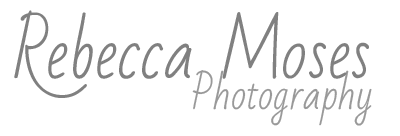
<style>
.page{position:relative;width:400px;height:136px;background:#ffffff}
.page>*{position:absolute;margin:0}
.t1{font:68.2px "BadScript-Regular";color:#808080}
.t2{font:39.8px "BadScript-Regular";color:#999999}
</style>
<div class="page">
<p class="t1" style="left:14px;top:10px;width:355px;height:88px">Rebecca Moses</p>
<p class="t2" style="left:192px;top:70px;width:180px;height:56px">Photography</p>
</div>
